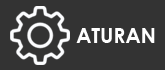
<style>
.page{position:relative;width:165px;height:70px;background:#333333}
.page>*{position:absolute;margin:0}
.t1{font:21px "CenturyGothic-Bold";letter-spacing:-0.01em;color:#ffffff}
</style>
<div class="page">
<p class="t1" style="left:76px;top:28px;width:79px;height:15px">ATURAN</p>
</div>
